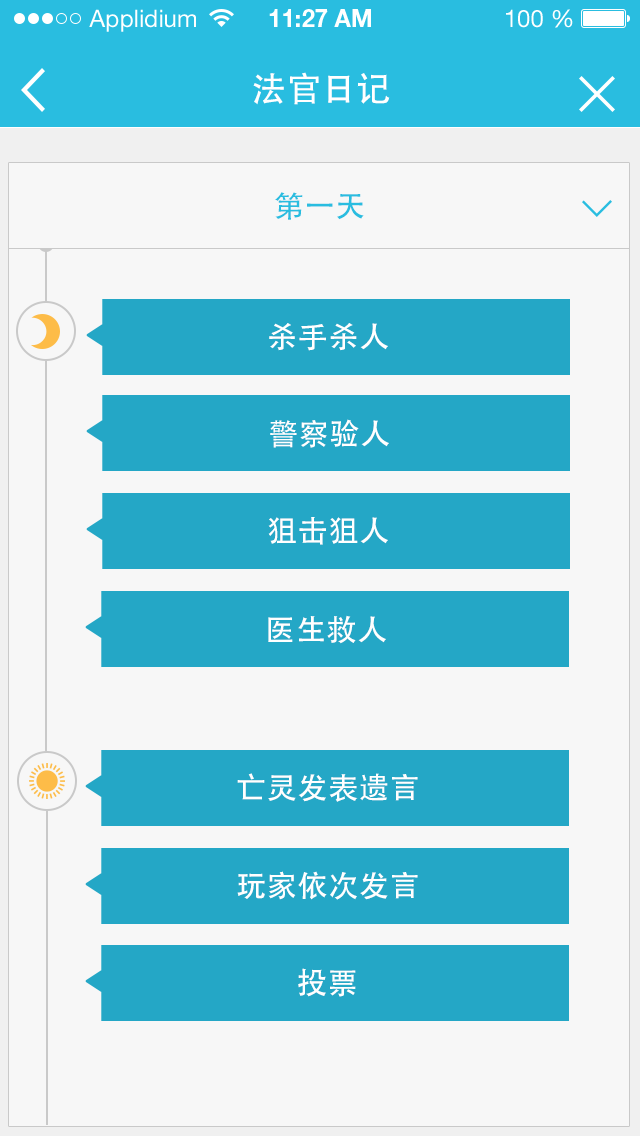
<style>
.page{position:relative;width:640px;height:1136px;background:#f7f7f7}
.page>*{position:absolute;margin:0}
.t1{font:34px "AdobeHeitiStd-Regular";letter-spacing:0.025em;color:#ffffff}
.t2{font:30px "AdobeHeitiStd-Regular";letter-spacing:0.025em;color:#29bde0}
.t3{font:30px "AdobeHeitiStd-Regular";letter-spacing:0.025em;color:#ffffff}
</style>
<div class="page">
<p class="t1" style="left:253px;top:72px;width:137px;height:33px">法官日记</p>
<p class="t2" style="left:275px;top:192px;width:89px;height:28px">第一天</p>
<p class="t3" style="left:269px;top:323px;width:119px;height:28px">杀手杀人</p>
<p class="t3" style="left:270px;top:419px;width:119px;height:29px">警察验人</p>
<p class="t3" style="left:268px;top:517px;width:120px;height:28px">狙击狙人</p>
<p class="t3" style="left:268px;top:615px;width:118px;height:29px">医生救人</p>
<p class="t3" style="left:237px;top:773px;width:181px;height:29px">亡灵发表遗言</p>
<p class="t3" style="left:237px;top:871px;width:181px;height:29px">玩家依次发言</p>
<p class="t3" style="left:298px;top:968px;width:58px;height:29px">投票</p>
</div>
